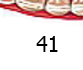
<style>
.page{position:relative;width:83px;height:70px;background:#ffffff}
.page>*{position:absolute;margin:0}
.t1{font:21px "Tahoma";color:#000000}
</style>
<div class="page">
<p class="t1" style="left:36px;top:36px;width:22px;height:16px">41</p>
</div>
